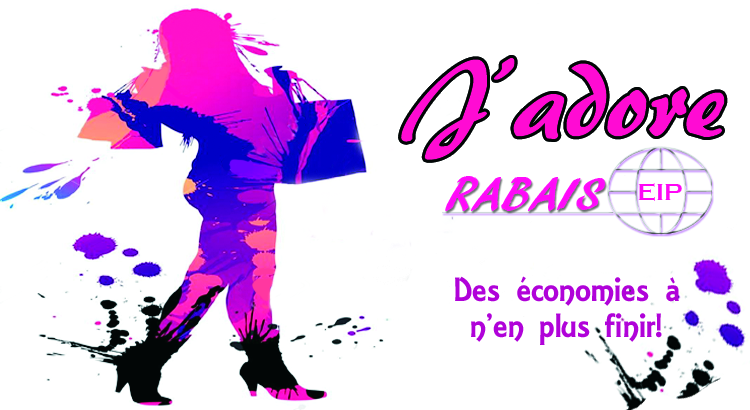
<style>
.page{position:relative;width:750px;height:410px;background:#ffffff}
.page>*{position:absolute;margin:0}
.t1{font:110px "ARBERKLEY";color:#ff0bd3}
.t2{font:49.2px "ARBLANCA";color:#ff06f6}
.t3{font:24.3px "CopperplateGothic-Bold";color:#ff06f6}
.t4{font:36px/36px "ARESSENCE";color:#b002d9}
</style>
<div class="page">
<p class="t1" style="left:401px;top:58px;width:324px;height:102px">J’adore</p>
<p class="t2" style="left:445px;top:176px;width:161px;height:35px">RABAIS</p>
<p class="t3" style="left:638px;top:183px;width:44px;height:18px">EIP</p>
<p class="t4" style="left:455px;top:276px;width:224px;height:69px;text-align:center">Des économies à <br>!n’en plus finir</p>
</div>
